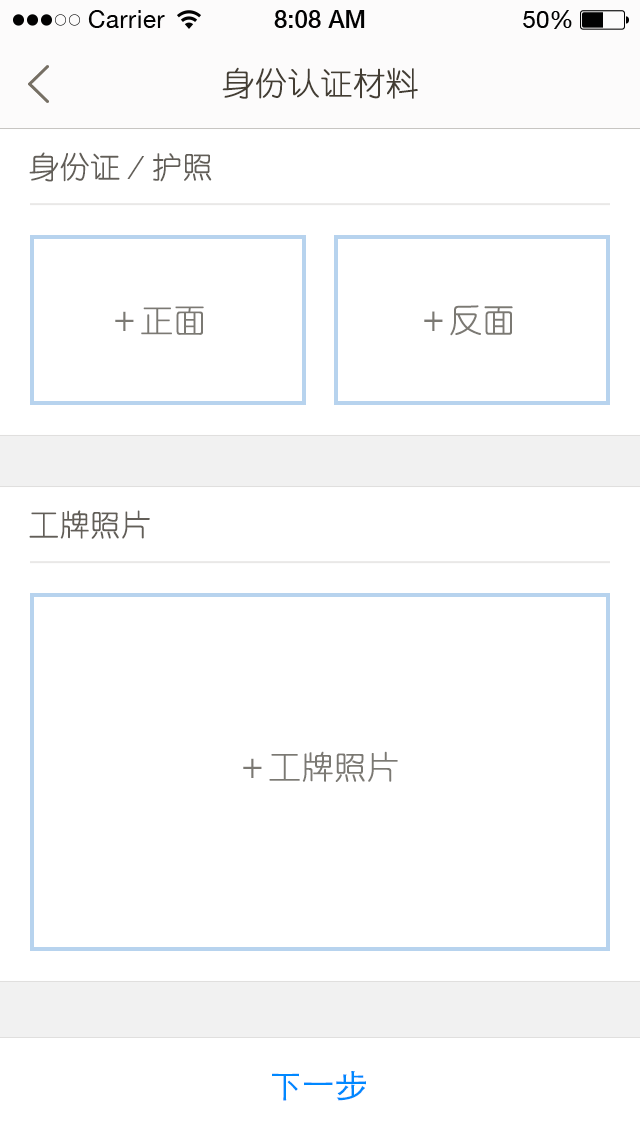
<style>
.page{position:relative;width:640px;height:1136px;background:#ffffff}
.page>*{position:absolute;margin:0}
.t1{font:32px "YouYuan";color:#433d33;text-transform:uppercase;font-weight:bold}
.t2{font:30px "YouYuan";color:#625e58;text-transform:uppercase;font-weight:bold}
.t3{font:32px "YouYuan";color:#7b7973;text-transform:uppercase;font-weight:bold}
.t4{font:32px "STHeitiSC-Light";color:#0088ff;text-transform:uppercase;font-weight:bold}
</style>
<div class="page">
<p class="t1" style="left:222px;top:67px;width:196px;height:32px">身份认证材料</p>
<p class="t2" style="left:29px;top:152px;width:183px;height:30px">身份证／护照</p>
<p class="t3" style="left:424px;top:305px;width:89px;height:31px">＋反面</p>
<p class="t3" style="left:115px;top:306px;width:89px;height:29px">＋正面</p>
<p class="t2" style="left:29px;top:510px;width:121px;height:29px">工牌照片</p>
<p class="t3" style="left:243px;top:751px;width:155px;height:31px">＋工牌照片</p>
<p class="t4" style="left:272px;top:1071px;width:94px;height:30px">下一步</p>
</div>
